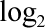
<style>
.page{position:relative;width:45px;height:28px;background:#ffffff}
.page>*{position:absolute;margin:0}
.t1{font:30px "TimesNewRomanPSMT";color:#000000}
</style>
<div class="page">
<p class="t1" style="left:0px;top:0px;width:45px;height:28px">log2</p>
</div>
